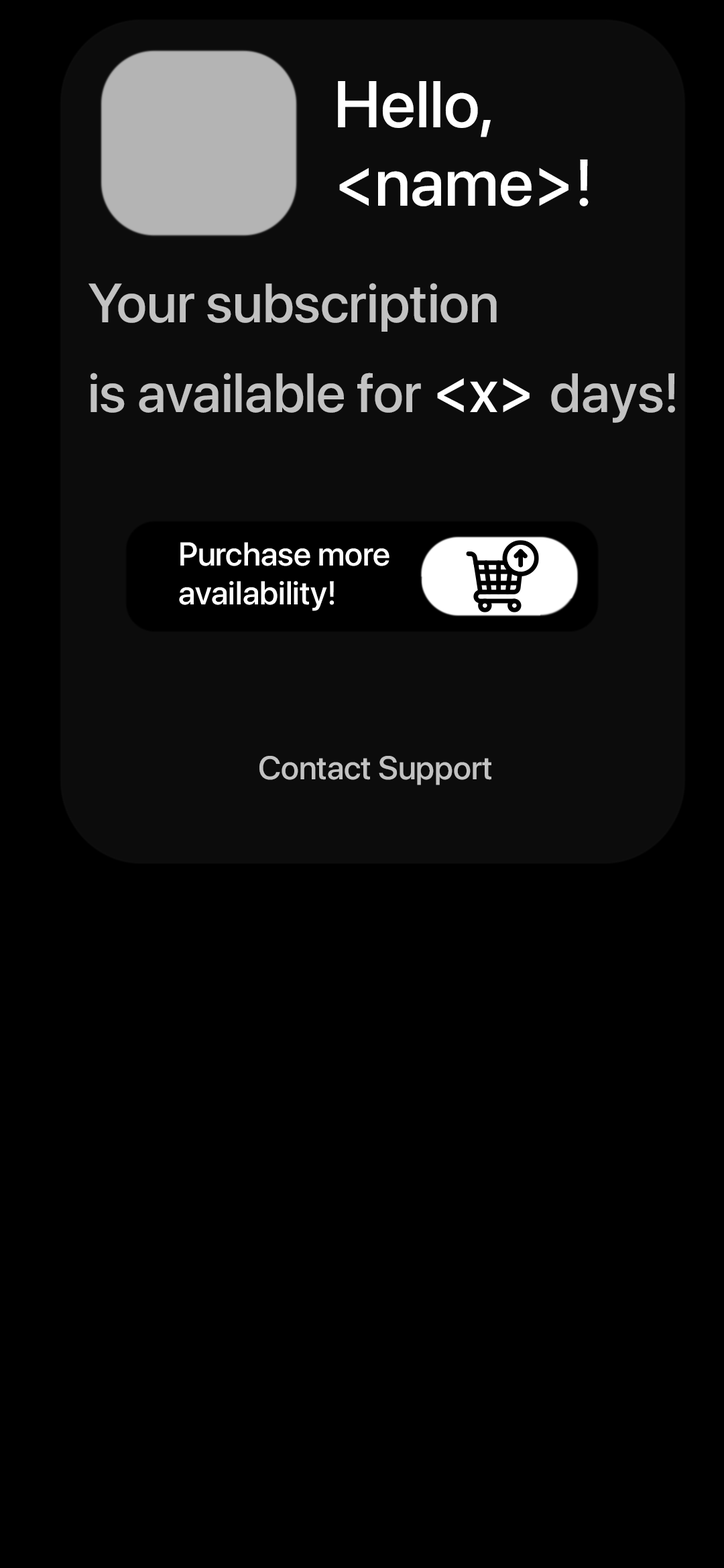
<style>
.page{position:relative;width:724px;height:1568px;background:#000000}
.page>*{position:absolute;margin:0}
.t1{font:65.7px "SFProDisplay-Medium";color:#ffffff}
.t2{font:54.9px "SFProDisplay-Medium";color:#c2c2c2}
.t3{font:59px "SFProDisplay-Medium";color:#ffffff}
.t4{font:32.8px "SFProDisplay-Medium";color:#ffffff}
.t5{font:32.8px "SFProDisplay-Medium";color:#c2c2c2}
</style>
<div class="page">
<p class="t1" style="left:338px;top:81px;width:250px;height:125px">Hello,<br>&lt;name&gt;!</p>
<p class="t2" style="left:88px;top:283px;width:587px;height:140px">Your subscription<br>is available for <span class="t3">&lt;x&gt; </span>days!</p>
<p class="t4" style="left:179px;top:542px;width:210px;height:69px">Purchase more<br>availability!</p>
<p class="t5" style="left:259px;top:756px;width:232px;height:29px">Contact Support</p>
</div>
